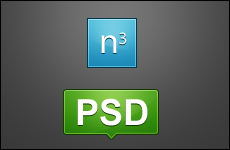
<style>
.page{position:relative;width:230px;height:150px}
.page>*{position:absolute;margin:0}
.t1{font:36px "MyriadPro-Regular";color:#ffffff}
.t2{font:30px "MyriadPro-Regular";color:#ffffff}
.t3{font:36px "Arial-BoldMT";color:#ffffff}
</style>
<div class="page">
<p class="t1" style="left:101px;top:35px;width:16px;height:18px">n</p>
<p class="t2" style="left:119px;top:32px;width:8px;height:13px">3</p>
<p class="t3" style="left:77px;top:98px;width:71px;height:28px">PSD</p>
</div>
